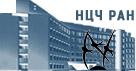
<style>
.page{position:relative;width:136px;height:71px;background:#ffffff}
.page>*{position:absolute;margin:0}
.t1{font:12.8px "KelsonSans-BoldRU";letter-spacing:0.075em;color:#3c5b72;text-transform:uppercase;font-weight:bold}
</style>
<div class="page">
<p class="t1" style="left:76px;top:10px;width:58px;height:12px">НЦЧ ран</p>
</div>
